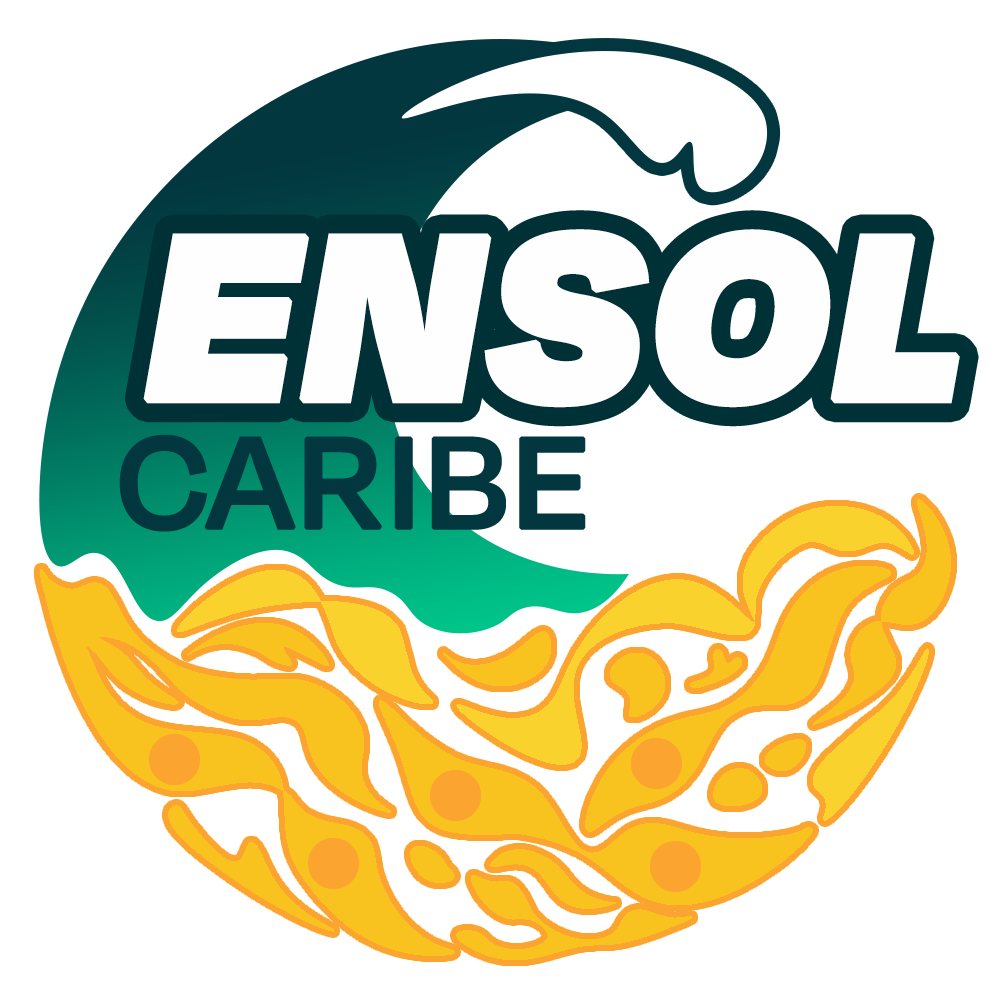
<style>
.page{position:relative;width:1000px;height:1000px;background:#ffffff}
.page>*{position:absolute;margin:0}
.t1{font:270.4px "Degular-BlackItalic";letter-spacing:-0.005em;color:#fefefe;font-weight:bold}
.t2{font:148.4px "Degular-Medium";letter-spacing:-0.005em;color:#02373f;font-weight:bold}
</style>
<div class="page">
<p class="t1" style="left:143px;top:229px;width:817px;height:179px">ENSOL</p>
<p class="t2" style="left:119px;top:434px;width:467px;height:98px">CARIBE</p>
</div>
